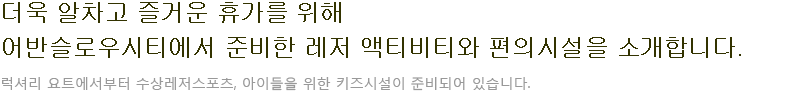
<style>
.page{position:relative;width:811px;height:110px;background:#ffffff}
.page>*{position:absolute;margin:0}
.t1{font:24px "Gulim";color:#333300}
.t2{font:14px "MalgunGothicRegular";color:#999999}
</style>
<div class="page">
<p class="t1" style="left:3px;top:2px;width:338px;height:21px">더욱 알차고 즐거운 휴가를 위해</p>
<p class="t1" style="left:3px;top:37px;width:738px;height:21px">어반슬로우시티에서 준비한 레저 액티비티와 편의시설을 소개합니다.</p>
<p class="t2" style="left:2px;top:77px;width:528px;height:14px">럭셔리 요트에서부터 수상레저스포츠, 아이들을 위한 키즈시설이 준비되어 있습니다.</p>
</div>
